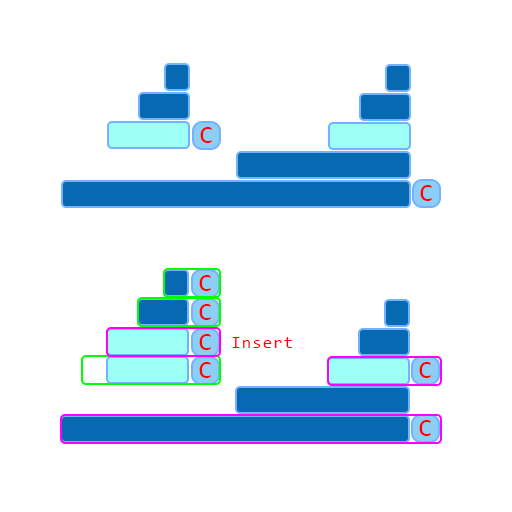
<style>
.page{position:relative;width:512px;height:512px;background:#ffffff}
.page>*{position:absolute;margin:0}
.t1{font:25px "Consolas";letter-spacing:0.08em;color:#ff0000}
.t2{font:16.7px "Consolas";letter-spacing:0.08em;color:#ff0000}
</style>
<div class="page">
<p class="t1" style="left:200px;top:127px;width:12px;height:16px">C</p>
<p class="t1" style="left:420px;top:185px;width:12px;height:16px">C</p>
<p class="t1" style="left:199px;top:275px;width:12px;height:16px">C</p>
<p class="t1" style="left:199px;top:304px;width:12px;height:16px">C</p>
<p class="t1" style="left:199px;top:334px;width:12px;height:16px">C</p>
<p class="t2" style="left:232px;top:337px;width:60px;height:11px">Insert</p>
<p class="t1" style="left:199px;top:362px;width:12px;height:16px">C</p>
<p class="t1" style="left:419px;top:362px;width:12px;height:16px">C</p>
<p class="t1" style="left:419px;top:420px;width:12px;height:16px">C</p>
</div>
